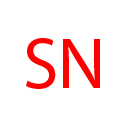
<style>
.page{position:relative;width:128px;height:128px;background:#ffffff}
.page>*{position:absolute;margin:0}
.t1{font:72px "MyriadPro-Regular";color:#ff0000}
</style>
<div class="page">
<p class="t1" style="left:26px;top:38px;width:74px;height:51px">SN</p>
</div>
